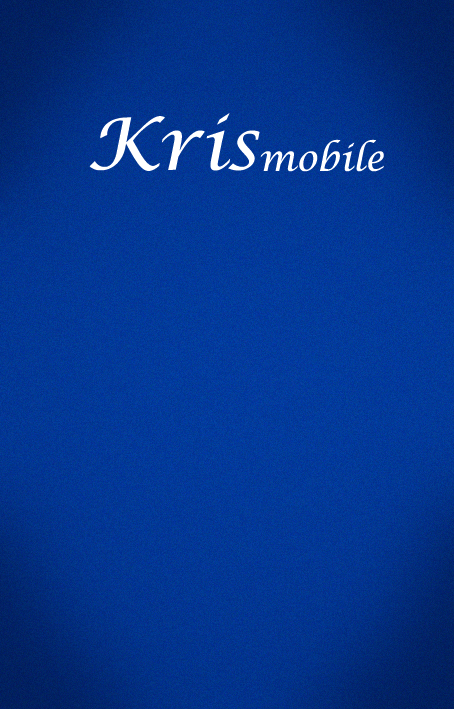
<style>
.page{position:relative;width:454px;height:709px}
.page>*{position:absolute;margin:0}
.t1{font:72px "LucidaCalligraphy-Italic";color:#ffffff}
.t2{font:36px "LucidaCalligraphy-Italic";color:#ffffff}
</style>
<div class="page">
<p class="t1" style="left:89px;top:113px;width:171px;height:58px">Kris</p>
<p class="t2" style="left:260px;top:139px;width:124px;height:33px">mobile</p>
</div>
